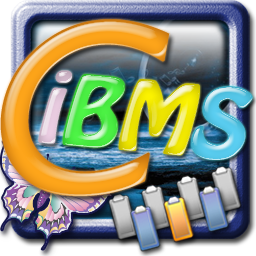
<style>
.page{position:relative;width:256px;height:256px}
.page>*{position:absolute;margin:0}
.t1{font:249.6px "GillSansMT";letter-spacing:0.1em;font-weight:bold;font-style:italic}
.t2{font:85.8px "HoboStd";letter-spacing:0.1em;font-weight:bold;font-style:italic}
</style>
<div class="page">
<p class="t1" style="left:0px;top:19px;width:170px;height:177px">C</p>
<p class="t2" style="left:38px;top:70px;width:34px;height:74px;rotate:5deg">i</p>
<p class="t2" style="left:62px;top:74px;width:63px;height:74px;rotate:5deg">B</p>
<p class="t2" style="left:118px;top:79px;width:82px;height:77px;rotate:5deg">M</p>
<p class="t2" style="left:191px;top:86px;width:62px;height:74px;rotate:5deg">S</p>
</div>
